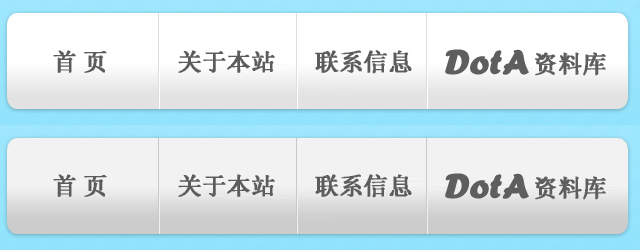
<style>
.page{position:relative;width:640px;height:250px}
.page>*{position:absolute;margin:0}
.t1{font:24px "System";color:#5c5c5c;font-weight:bold}
.t2{font:35px "ForteMT";color:#5e5e5e;font-weight:bold}
.t3{font:24px "System";color:#5e5e5e;font-weight:bold}
</style>
<div class="page">
<p class="t1" style="left:53px;top:50px;width:54px;height:23px">首 页</p>
<p class="t1" style="left:178px;top:50px;width:97px;height:23px">关于本站</p>
<p class="t1" style="left:315px;top:50px;width:97px;height:24px">联系信息</p>
<p class="t2" style="left:445px;top:49px;width:84px;height:26px">DotA</p>
<p class="t3" style="left:535px;top:52px;width:71px;height:24px">资料库</p>
<p class="t1" style="left:53px;top:174px;width:54px;height:23px">首 页</p>
<p class="t1" style="left:178px;top:174px;width:97px;height:23px">关于本站</p>
<p class="t1" style="left:315px;top:174px;width:97px;height:24px">联系信息</p>
<p class="t2" style="left:445px;top:173px;width:84px;height:26px">DotA</p>
<p class="t3" style="left:535px;top:176px;width:71px;height:24px">资料库</p>
</div>
